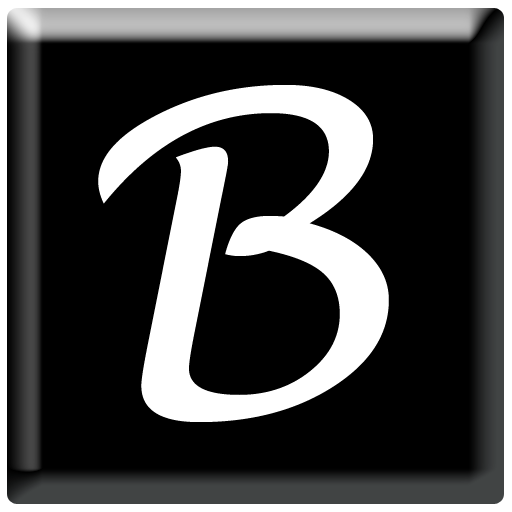
<style>
.page{position:relative;width:512px;height:512px;background:#000000}
.page>*{position:absolute;margin:0}
.t1{font:431px "LucidaHandwriting-Italic";color:#ffffff}
</style>
<div class="page">
<p class="t1" style="left:98px;top:85px;width:291px;height:337px">B</p>
</div>
